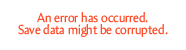
<style>
.page{position:relative;width:186px;height:50px;background:#ffffff}
.page>*{position:absolute;margin:0}
.t1{font:13.2px/12px "Amira-Roman";color:#fe4d2a;scale:0.91 1}
</style>
<div class="page">
<p class="t1" style="left:18px;top:12px;width:150px;height:25px;text-align:center">An error has occurred. <br>Save data might be corrupted.</p>
</div>
